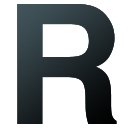
<style>
.page{position:relative;width:128px;height:128px;background:#ffffff}
.page>*{position:absolute;margin:0}
.t1{font:167px "Helvetica-Bold"}
</style>
<div class="page">
<p class="t1" style="left:17px;top:4px;width:100px;height:120px">R</p>
</div>
